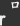
<style>
.page{position:relative;width:20px;height:26px;background:#333333}
.page>*{position:absolute;margin:0}
.t1{font:12px "DFKaiShu-SB-Estd-BF";color:#ececec;font-weight:bold}
.t2{font:18px "ArialMT";color:#ececec;font-weight:bold}
</style>
<div class="page">
<p class="t1" style="left:11px;top:1px;width:8px;height:8px">口</p>
<p class="t2" style="left:0px;top:15px;width:6px;height:11px">r</p>
</div>
